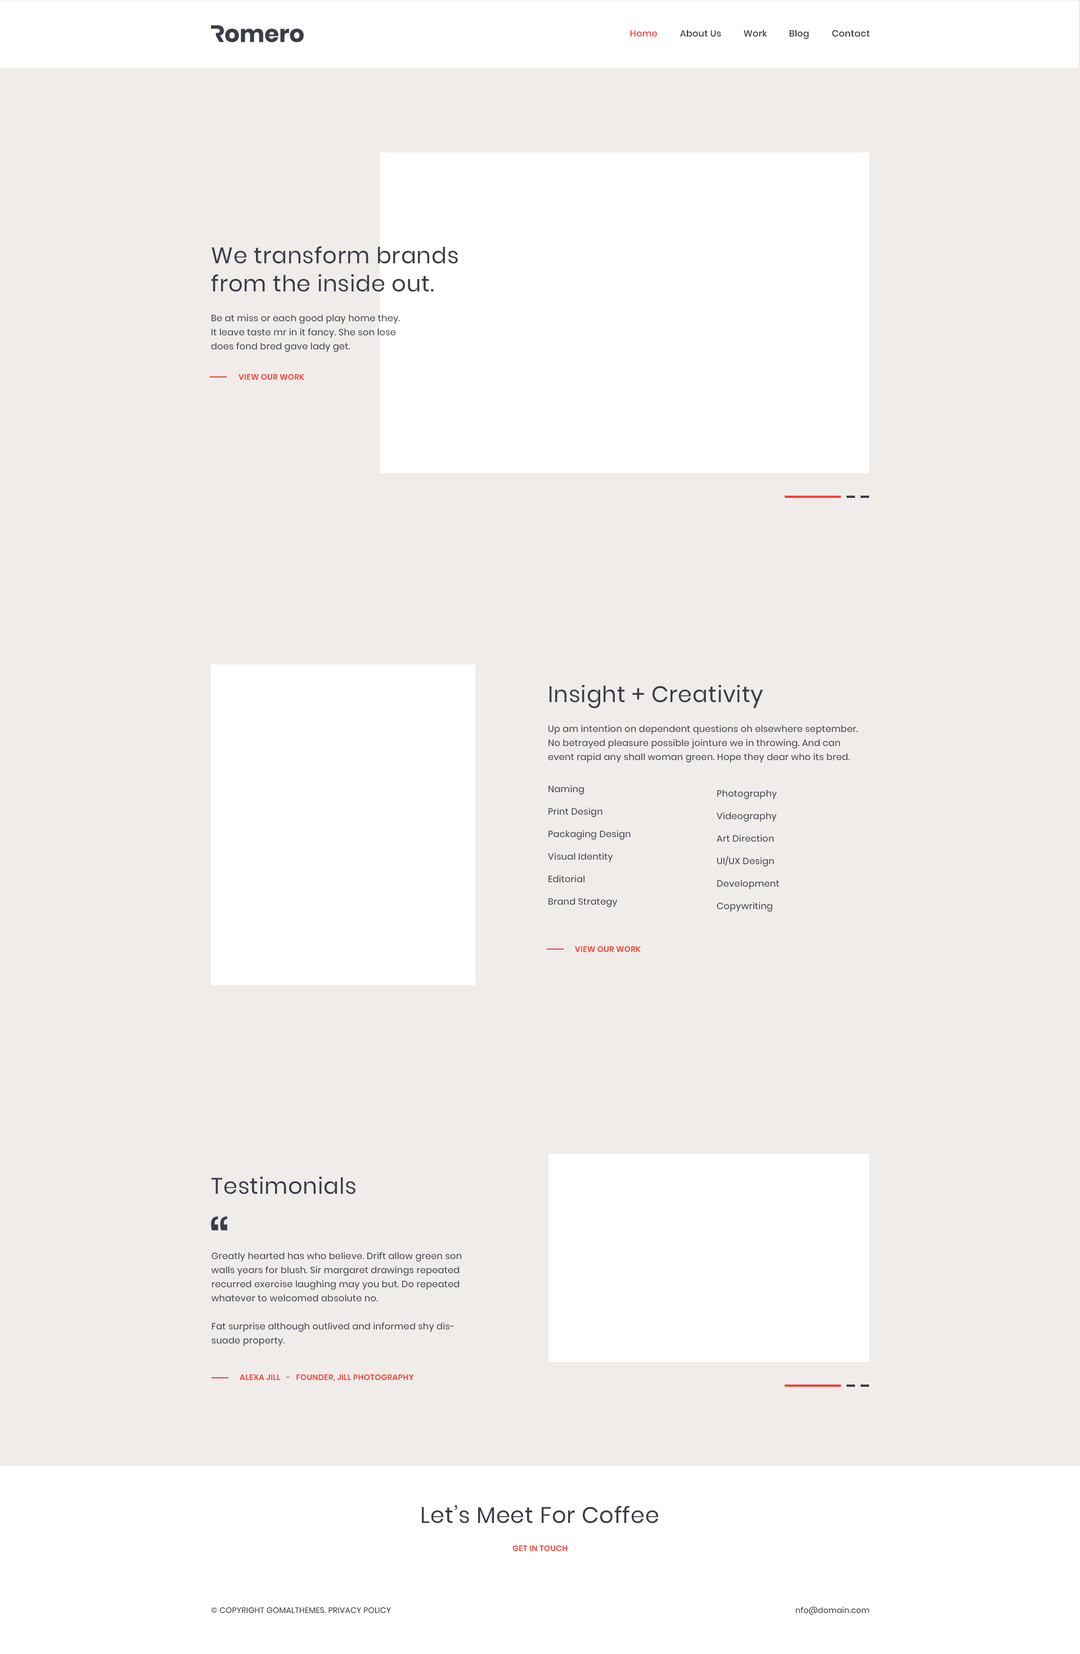
<style>
.page{position:relative;width:1080px;height:1654px;background:#efecea}
.page>*{position:absolute;margin:0}
.t1{font:9px "Poppins-Medium";letter-spacing:0.02em;color:#f44336}
.t2{font:9px "Poppins-Medium";letter-spacing:0.02em;color:#3a3c49}
.t3{font:22.5px/28.1px "Poppins-Regular";letter-spacing:0.02em;color:#3a3c49}
.t4{font:9px/14.1px "Poppins-Regular";letter-spacing:0.02em;color:#3a3c49}
.t5{font:7.9px "Poppins-SemiBold";letter-spacing:0.02em;color:#f44336}
.t6{font:22.5px "Poppins-Regular";letter-spacing:0.02em;color:#3a3c49}
.t7{font:9px "Poppins-Regular";letter-spacing:0.02em;color:#3a3c49}
.t8{font:7.9px "Poppins-Regular";letter-spacing:0.02em;color:#3a3c49}
</style>
<div class="page">
<p class="t1" style="left:630px;top:30px;width:28px;height:7px">Home</p>
<p class="t2" style="left:680px;top:30px;width:41px;height:7px">About Us</p>
<p class="t2" style="left:744px;top:30px;width:23px;height:7px">Work</p>
<p class="t2" style="left:789px;top:30px;width:20px;height:9px">Blog</p>
<p class="t2" style="left:832px;top:30px;width:38px;height:7px">Contact</p>
<p class="t3" style="left:211px;top:246px;width:247px;height:46px">We transform brands <br>from the inside out.</p>
<p class="t4" style="left:211px;top:314px;width:189px;height:38px">Be at miss or each good play home they. <br>It leave taste mr in it fancy. She son lose <br>does fond bred gave lady get.</p>
<p class="t5" style="left:238px;top:374px;width:66px;height:6px">VIEW OUR WORK</p>
<p class="t6" style="left:550px;top:685px;width:213px;height:23px">Insight + Creativity</p>
<p class="t4" style="left:548px;top:724px;width:310px;height:39px">Up am intention on dependent questions oh elsewhere september. <br>No betrayed pleasure possible jointure we in throwing. And can <br>event rapid any shall woman green. Hope they dear who its bred.</p>
<p class="t7" style="left:548px;top:785px;width:36px;height:10px">Naming</p>
<p class="t7" style="left:717px;top:790px;width:60px;height:9px">Photography</p>
<p class="t7" style="left:548px;top:807px;width:54px;height:10px">Print Design</p>
<p class="t7" style="left:717px;top:812px;width:60px;height:10px">Videography</p>
<p class="t7" style="left:548px;top:830px;width:83px;height:10px">Packaging Design</p>
<p class="t7" style="left:717px;top:834px;width:57px;height:8px">Art Direction</p>
<p class="t7" style="left:548px;top:852px;width:65px;height:10px">Visual Identity</p>
<p class="t7" style="left:717px;top:856px;width:57px;height:11px">UI/UX Design</p>
<p class="t7" style="left:548px;top:875px;width:37px;height:8px">Editorial</p>
<p class="t7" style="left:717px;top:880px;width:62px;height:9px">Development</p>
<p class="t7" style="left:548px;top:898px;width:70px;height:9px">Brand Strategy</p>
<p class="t7" style="left:717px;top:902px;width:55px;height:10px">Copywriting</p>
<p class="t5" style="left:575px;top:946px;width:66px;height:6px">VIEW OUR WORK</p>
<p class="t6" style="left:211px;top:1176px;width:145px;height:18px">Testimonials</p>
<p class="t4" style="left:212px;top:1252px;width:250px;height:94px">Greatly hearted has who believe. Drift allow green son walls years for blush. Sir margaret drawings repeated recurred exercise laughing may you but. Do repeated whatever to welcomed absolute no.<br><br>Fat surprise although outlived and informed shy dissuade property.</p>
<p class="t5" style="left:240px;top:1374px;width:174px;height:8px">ALEXA JILL   -   FOUNDER, JILL PHOTOGRAPHY</p>
<p class="t6" style="left:422px;top:1505px;width:236px;height:18px">Let’s Meet For Coffee</p>
<p class="t5" style="left:512px;top:1545px;width:56px;height:6px">GET IN TOUCH</p>
<p class="t8" style="left:211px;top:1606px;width:180px;height:7px">© COPYRIGHT GOMALTHEMES. PRIVACY POLICY</p>
<p class="t8" style="left:795px;top:1606px;width:74px;height:9px">nfo@domain.com</p>
</div>
